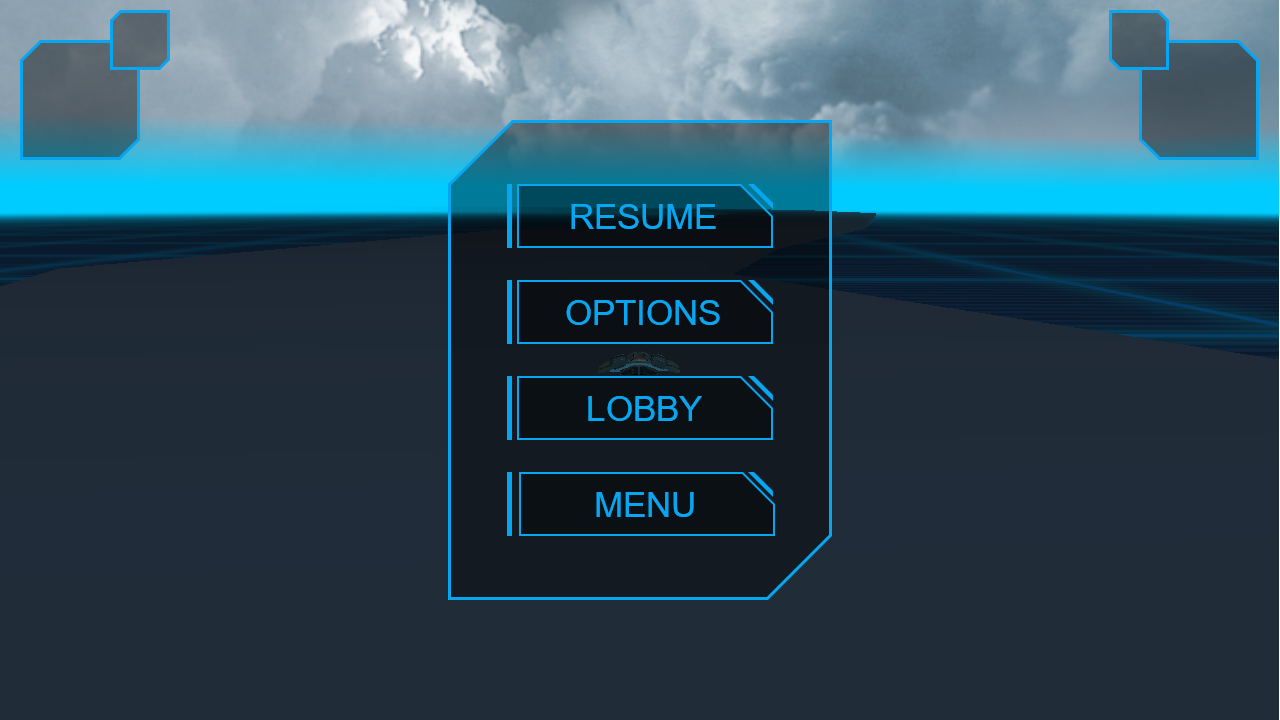
<style>
.page{position:relative;width:1280px;height:720px;background:#212c39}
.page>*{position:absolute;margin:0}
.t1{font:35px "ArialMT";color:#07a6f0}
</style>
<div class="page">
<p class="t1" style="left:571px;top:204px;width:145px;height:25px">RESUME</p>
<p class="t1" style="left:566px;top:300px;width:154px;height:25px">OPTIONS</p>
<p class="t1" style="left:588px;top:396px;width:114px;height:25px">LOBBY</p>
<p class="t1" style="left:596px;top:492px;width:98px;height:25px">MENU</p>
</div>
